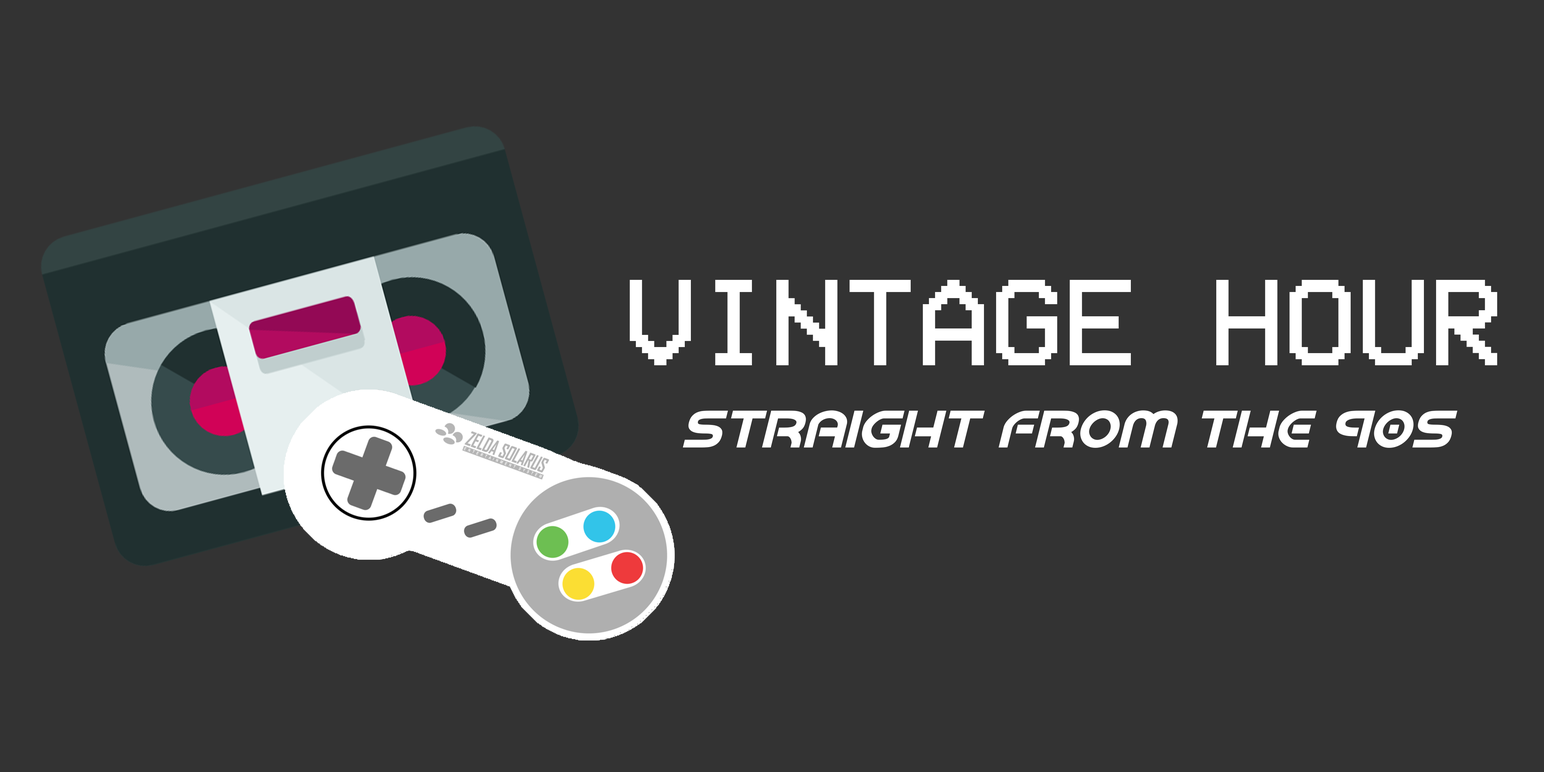
<style>
.page{position:relative;width:1544px;height:772px;background:#333333}
.page>*{position:absolute;margin:0}
.t1{font:125.1px "VCROSDMono";color:#ffffff}
.t2{font:64.3px "BarcadeNoBarItalic";color:#ffffff}
</style>
<div class="page">
<p class="t1" style="left:630px;top:280px;width:867px;height:85px">VINTAGE HOUR</p>
<p class="t2" style="left:683px;top:410px;width:775px;height:38px">Straight from the 90s</p>
</div>
